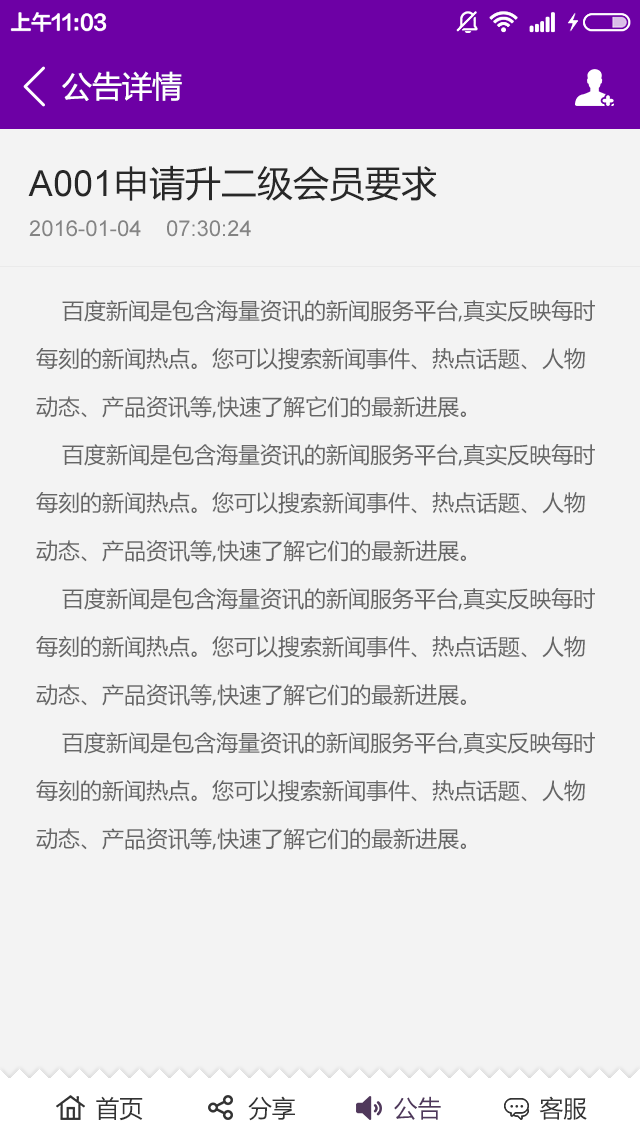
<style>
.page{position:relative;width:640px;height:1136px;background:#f3f3f3}
.page>*{position:absolute;margin:0}
.t1{font:30px "MicrosoftYaHei";color:#ffffff}
.t2{font:22px/40px "ArialMT";color:#848484}
.t3{font:36px/40px "ArialMT";color:#282828}
.t4{font:36px/40px "MicrosoftYaHei";color:#282828}
.t5{font:22px/48px "MicrosoftYaHei";color:#666666}
.t6{font:24px "MicrosoftYaHei";color:#333333}
.t7{font:24px "MicrosoftYaHei";color:#4f385c}
</style>
<div class="page">
<p class="t1" style="left:62px;top:71px;width:120px;height:30px">公告详情</p>
<p class="t2" style="left:28px;top:165px;width:409px;height:72px"><span class="t3">A001</span><span class="t4">申请升二级会员要求<br></span>2016-01-04    07:30:24</p>
<p class="t5" style="left:36px;top:300px;width:559px;height:550px">百度新闻是包含海量资讯的新闻服务平台,真实反映每时每刻的新闻热点。您可以搜索新闻事件、热点话题、人物动态、产品资讯等,快速了解它们的最新进展。<br>    百度新闻是包含海量资讯的新闻服务平台,真实反映每时每刻的新闻热点。您可以搜索新闻事件、热点话题、人物动态、产品资讯等,快速了解它们的最新进展。<br>    百度新闻是包含海量资讯的新闻服务平台,真实反映每时每刻的新闻热点。您可以搜索新闻事件、热点话题、人物动态、产品资讯等,快速了解它们的最新进展。<br>    百度新闻是包含海量资讯的新闻服务平台,真实反映每时每刻的新闻热点。您可以搜索新闻事件、热点话题、人物动态、产品资讯等,快速了解它们的最新进展。</p>
<p class="t6" style="left:96px;top:1096px;width:491px;height:25px">首页               分享              <span class="t7">公告</span>              客服</p>
</div>
